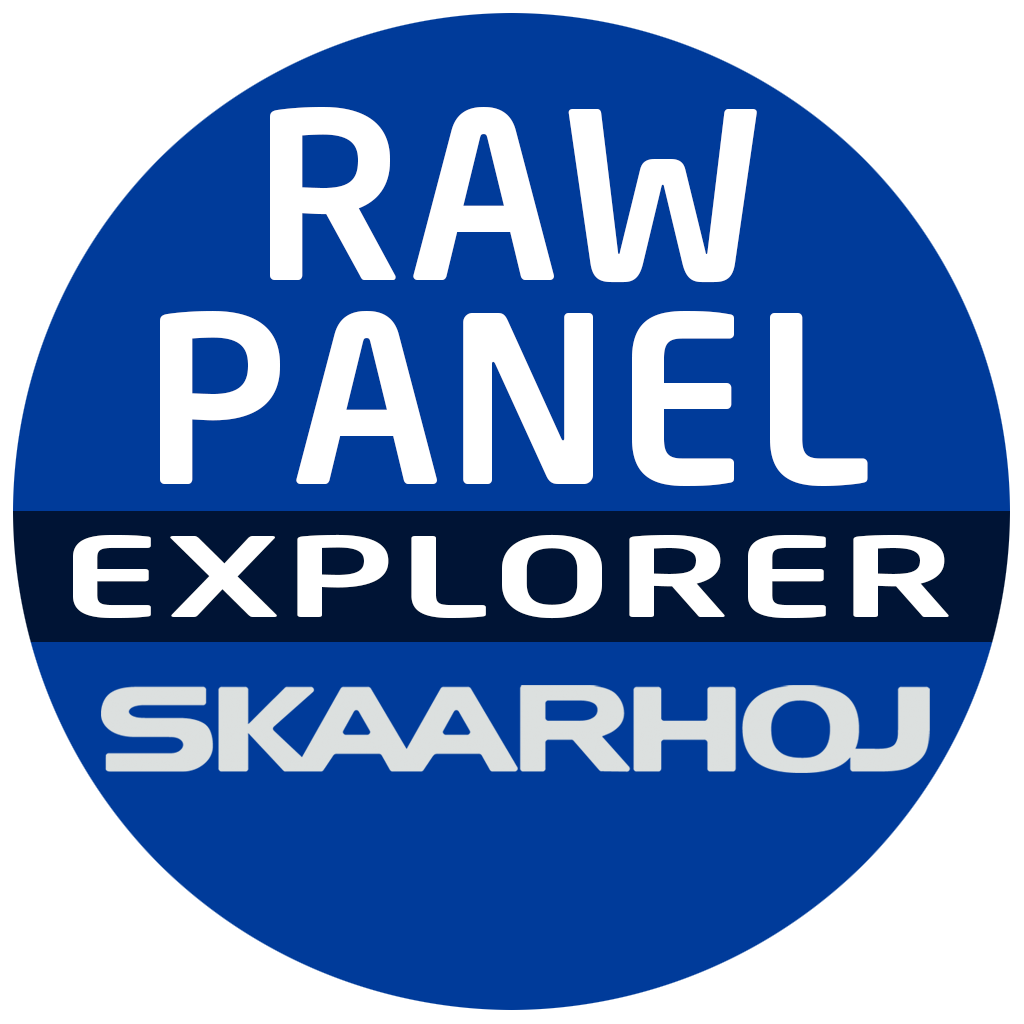
<style>
.page{position:relative;width:1024px;height:1024px;background:#003b9a}
.page>*{position:absolute;margin:0}
.t1{font:231.1px/204.5px "NeoSansPro-Medium";letter-spacing:0.02em;color:#ffffff}
.t2{font:108.7px "NeoSansPro-Medium";letter-spacing:0.02em;color:#ffffff;scale:1.62 1}
</style>
<div class="page">
<p class="t1" style="left:160px;top:107px;width:708px;height:379px;text-align:center">RAW<br>PANEL</p>
<p class="t2" style="left:73px;top:534px;width:876px;height:85px">EXPLORER</p>
</div>
